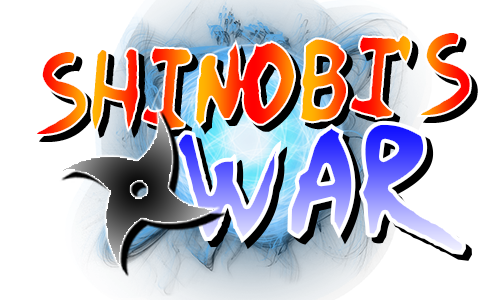
<style>
.page{position:relative;width:500px;height:300px;background:#ffffff}
.page>*{position:absolute;margin:0}
.t1{font:94.4px "Ninja-Naruto";scale:0.88 1}
.t2{font:126.2px "Ninja-Naruto";scale:1.04 1}
</style>
<div class="page">
<p class="t1" style="left:33px;top:31px;width:439px;height:105px;rotate:-3deg">Shinobi's</p>
<p class="t2" style="left:174px;top:120px;width:292px;height:135px;rotate:-3deg">war</p>
</div>
